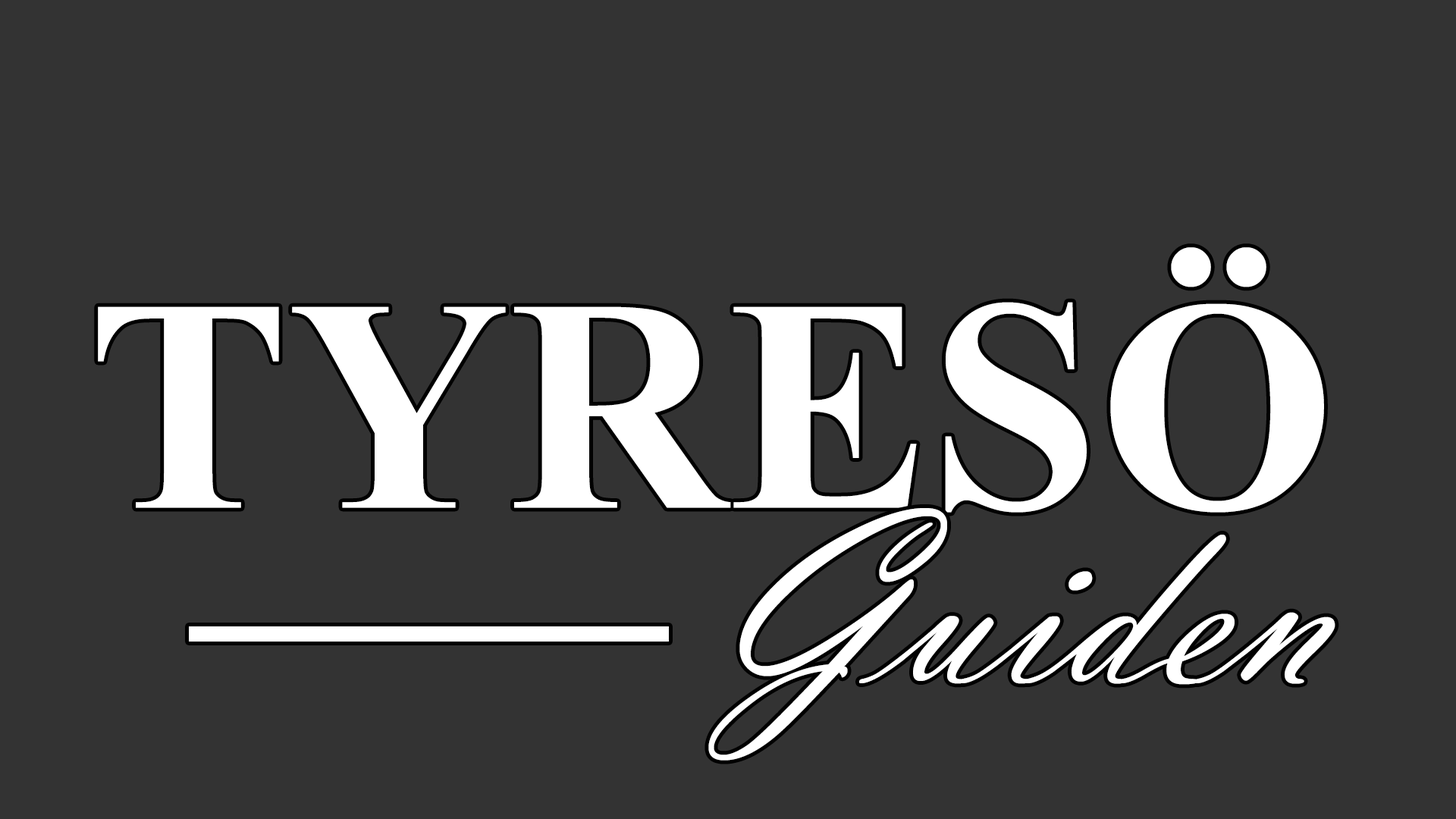
<style>
.page{position:relative;width:1456px;height:819px;background:#333333}
.page>*{position:absolute;margin:0}
.t1{font:303.3px "TimesNewRomanPS-BoldMT";color:#ffffff}
.t2{font:252.8px "VladimirScript";color:#ffffff}
</style>
<div class="page">
<p class="t1" style="left:98px;top:247px;width:1226px;height:266px">TYRESÖ</p>
<p class="t2" style="left:708px;top:508px;width:627px;height:253px">Guiden</p>
</div>
